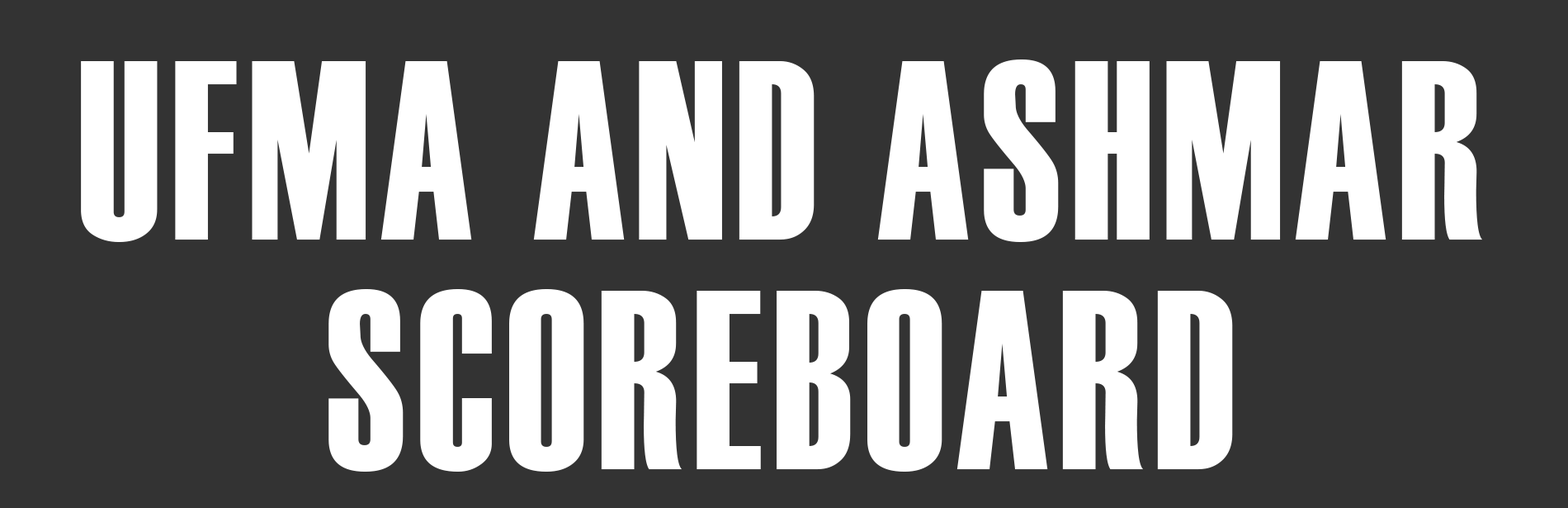
<style>
.page{position:relative;width:1568px;height:508px;background:#333333}
.page>*{position:absolute;margin:0}
.t1{font:255.1px/76.4px "Haettenschweiler";letter-spacing:0.05em;color:#ffffff;scale:0.83 1}
</style>
<div class="page">
<p class="t1" style="left:81px;top:59px;width:1401px;height:412px;text-align:center">UFMA AND ASHMAR<br><br><br>SCOREBOARD</p>
</div>
